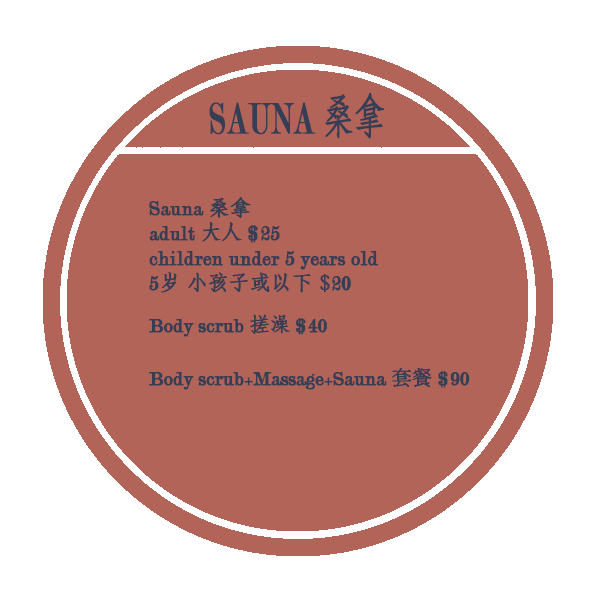
<style>
.page{position:relative;width:600px;height:600px;background:#b36458}
.page>*{position:absolute;margin:0}
.t1{font:46.8px "Modern-Regular";color:#353e55;font-weight:bold;scale:0.65 1}
.t2{font:46.8px "AdobeFangsongStd-Regular";color:#353e55;font-weight:bold;scale:0.65 1}
.t3{font:20.7px "Modern-Regular";color:#353e55;font-weight:bold}
.t4{font:20.7px "AdobeFangsongStd-Regular";color:#353e55;font-weight:bold}
.t5{font:20px "Modern-Regular";color:#353e55;font-weight:bold}
.t6{font:20px "AdobeFangsongStd-Regular";color:#353e55;font-weight:bold}
.t7{font:20px "AdobeMingStd-Light";color:#353e55;font-weight:bold}
</style>
<div class="page">
<p class="t1" style="left:209px;top:93px;width:175px;height:46px">SAUNA <span class="t2">桑拿</span></p>
<p class="t3" style="left:149px;top:197px;width:229px;height:96px">Sauna <span class="t4">桑拿<br></span>adult <span class="t4">大人</span> $25<br>children under 5 years old <br>5<span class="t4">岁 小孩子或以下 $</span>20</p>
<p class="t5" style="left:149px;top:314px;width:178px;height:23px">Body scrub <span class="t6">搓澡</span> $40</p>
<p class="t5" style="left:149px;top:367px;width:321px;height:23px">Body scrub+Massage+Sauna <span class="t7">套餐</span> $90</p>
</div>
